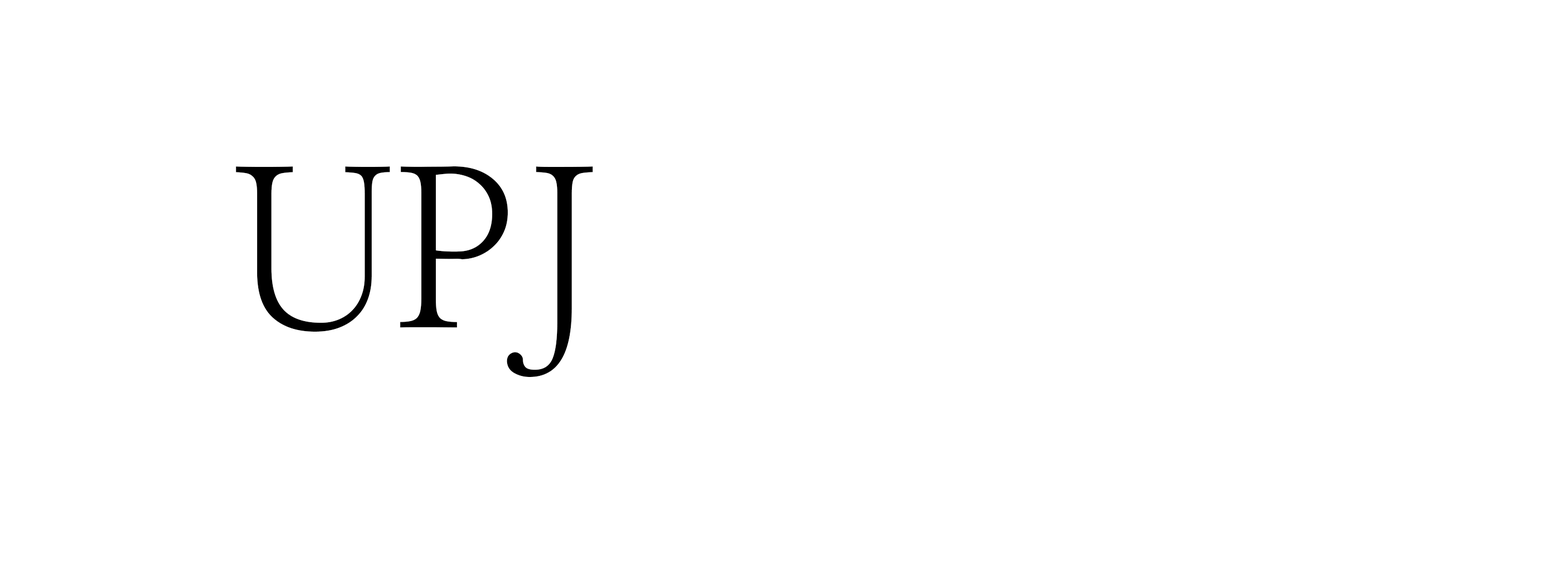
<style>
.page{position:relative;width:1568px;height:566px;background:#ffffff}
.page>*{position:absolute;margin:0}
.t1{font:221.2px "NanumMyeongjo";color:#000000}
</style>
<div class="page">
<p class="t1" style="left:236px;top:166px;width:357px;height:211px">UPJ</p>
</div>
